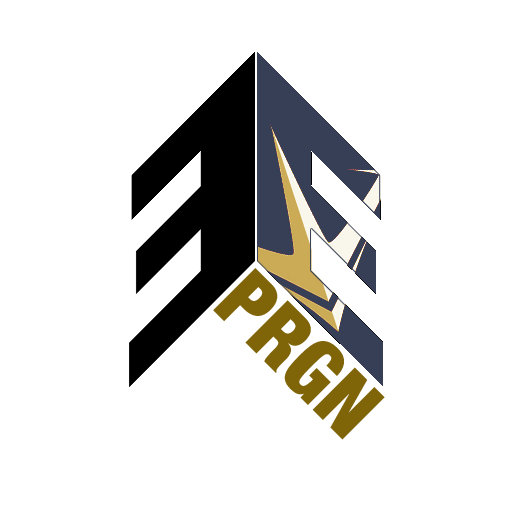
<style>
.page{position:relative;width:512px;height:512px;background:#ffffff}
.page>*{position:absolute;margin:0}
.t1{font:83.8px "HelveticaNeue-CondensedBlack";color:#806508}
</style>
<div class="page">
<p class="t1" style="left:213px;top:268px;width:172px;height:172px;rotate:45deg">PRGN</p>
</div>
